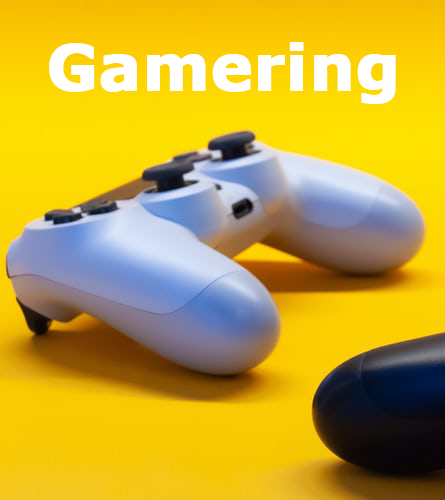
<style>
.page{position:relative;width:445px;height:500px}
.page>*{position:absolute;margin:0}
.t1{font:62.5px "Verdana-Bold";color:#ffffff;font-weight:bold}
</style>
<div class="page">
<p class="t1" style="left:49px;top:42px;width:347px;height:62px">Gamering</p>
</div>
